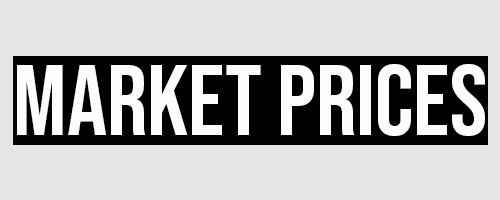
<style>
.page{position:relative;width:500px;height:200px;background:#e5e5e5}
.page>*{position:absolute;margin:0}
.t1{font:100px "BebasNeue-Regular";color:#fefefe}
</style>
<div class="page">
<p class="t1" style="left:17px;top:64px;width:468px;height:72px">MARKET PRICES</p>
</div>
